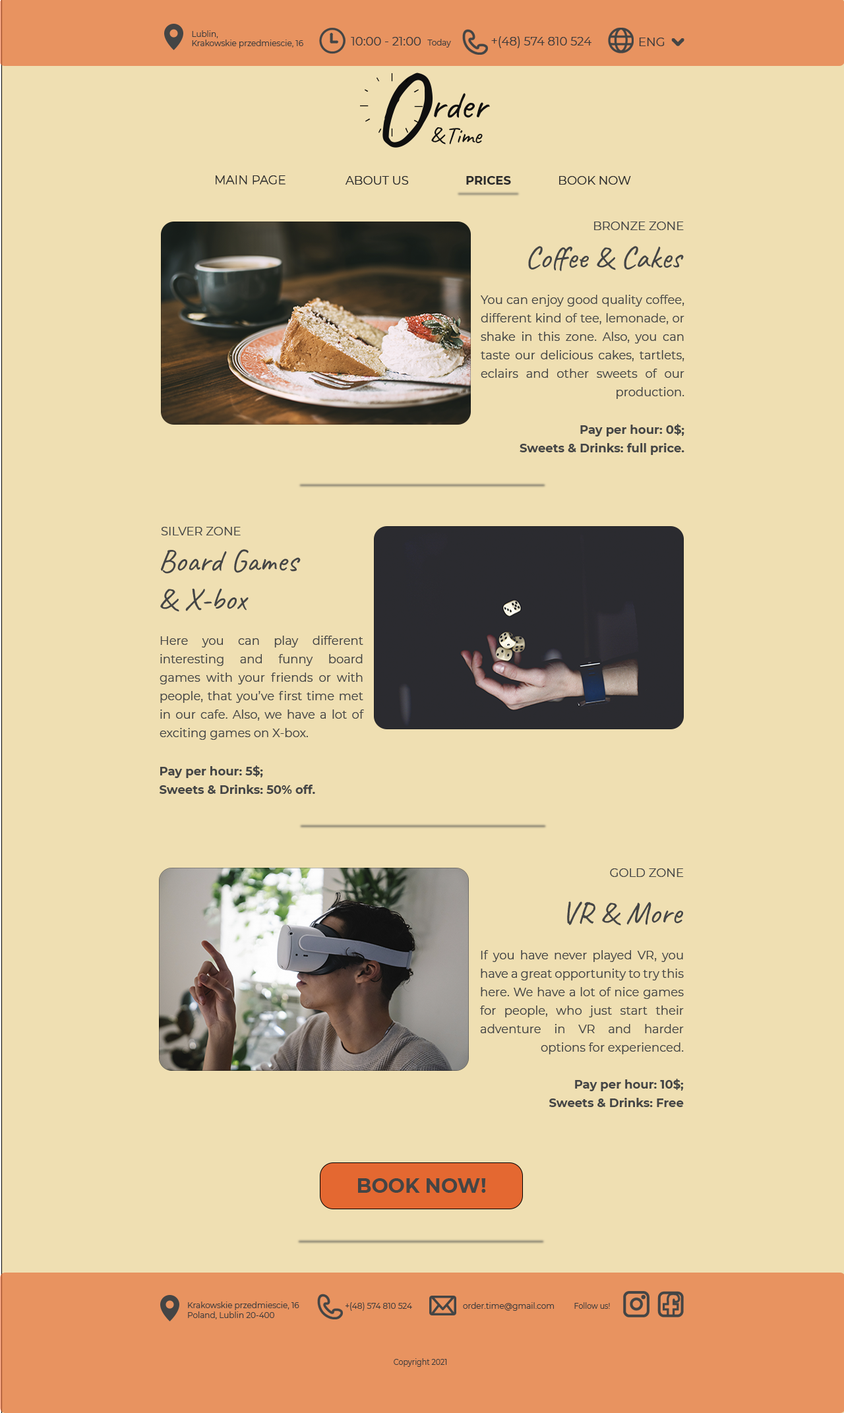
<style>
.page{position:relative;width:844px;height:1413px;background:#efdfb2}
.page>*{position:absolute;margin:0}
.t1{font:7.9px "Montserrat-Regular";color:#3e3b3b}
.t2{font:11.9px "Montserrat-Regular";color:#3e3b3b}
.t3{font:105.5px "Caveat-Regular";color:#0f0f0f}
.t4{font:39.6px "Caveat-Regular";color:#0f0f0f}
.t5{font:23.7px "Caveat-Regular";color:#0f0f0f}
.t6{font:11.9px "Montserrat-ExtraLight";color:#2b2b2b;font-weight:bold}
.t7{font:11.9px "Montserrat-Regular";color:#2b2b2b}
.t8{font:11.9px "Montserrat-Bold";color:#2b2b2b}
.t9{font:11.9px "Montserrat-Regular";color:#444545}
.t10{font:31.6px "Caveat-Regular";color:#444545}
.t11{font:11.9px/18.5px "Montserrat-Regular";color:#444545}
.t12{font:11.9px/18.5px "Montserrat-Bold";color:#444545}
.t13{font:19.8px "Montserrat-Bold";color:#444545}
.t14{font:7.9px "Montserrat-Regular";color:#3e3b3b;scale:0.92 1}
</style>
<div class="page">
<p class="t1" style="left:192px;top:30px;width:111px;height:18px;text-align:justify">Lublin,<br>Krakowskie przedmiescie, 16</p>
<p class="t2" style="left:351px;top:37px;width:100px;height:10px">10:00 - 21:00  <span class="t1">Today</span></p>
<p class="t2" style="left:491px;top:36px;width:100px;height:12px">+(48) 574 810 524</p>
<p class="t2" style="left:639px;top:38px;width:26px;height:8px">ENG</p>
<p class="t3" style="left:382px;top:73px;width:51px;height:75px">O</p>
<p class="t4" style="left:434px;top:93px;width:56px;height:25px">rder</p>
<p class="t5" style="left:431px;top:127px;width:15px;height:17px">&amp;</p>
<p class="t5" style="left:449px;top:128px;width:34px;height:16px">Time</p>
<p class="t6" style="left:216px;top:175px;width:69px;height:10px">MAIN PAGE</p>
<p class="t7" style="left:345px;top:176px;width:64px;height:9px">ABOUT US</p>
<p class="t8" style="left:466px;top:176px;width:45px;height:9px">PRICES</p>
<p class="t7" style="left:559px;top:176px;width:72px;height:9px">BOOK NOW</p>
<p class="t9" style="left:594px;top:222px;width:90px;height:8px">BRONZE ZONE</p>
<p class="t10" style="left:528px;top:246px;width:156px;height:26px">Coffee &amp; Cakes</p>
<p class="t11" style="left:481px;top:295px;width:203px;height:104px;text-align:justify">You can enjoy good quality coffee, different kind of tee, lemonade, or shake in this zone. Also, you can taste our delicious cakes, tartlets, eclairs and other sweets of our production.</p>
<p class="t12" style="left:520px;top:424px;width:164px;height:31px;text-align:right">Pay per hour: 0$;<br>Sweets &amp; Drinks: full price.</p>
<p class="t9" style="left:161px;top:527px;width:80px;height:8px">SILVER ZONE</p>
<p class="t10" style="left:160px;top:549px;width:141px;height:63px">Board Games <br>&amp; X-box</p>
<p class="t11" style="left:160px;top:636px;width:204px;height:104px;text-align:justify">Here you can play different interesting and funny board games with your friends or with people, that you’ve first time met in our cafe. Also, we have a lot of exciting games on X-box.</p>
<p class="t12" style="left:160px;top:765px;width:155px;height:29px;text-align:justify">Pay per hour: 5$;<br>Sweets &amp; Drinks: 50% off.</p>
<p class="t9" style="left:610px;top:868px;width:74px;height:9px">GOLD ZONE</p>
<p class="t10" style="left:567px;top:901px;width:116px;height:25px">VR &amp; More</p>
<p class="t11" style="left:480px;top:950px;width:204px;height:104px;text-align:justify">If you have never played VR, you have a great opportunity to try this here. We have a lot of nice games for people, who just start their adventure in VR and harder options for experienced.</p>
<p class="t12" style="left:549px;top:1079px;width:135px;height:28px;text-align:justify">Pay per hour: 10$;<br>Sweets &amp; Drinks: Free</p>
<p class="t13" style="left:358px;top:1178px;width:128px;height:15px">BOOK NOW!</p>
<p class="t1" style="left:188px;top:1302px;width:111px;height:17px;text-align:justify">Krakowskie przedmiescie, 16<br>Poland, Lublin 20-400</p>
<p class="t1" style="left:345px;top:1302px;width:67px;height:9px">+(48) 574 810 524</p>
<p class="t1" style="left:463px;top:1302px;width:91px;height:9px">order.time@gmail.com</p>
<p class="t14" style="left:574px;top:1302px;width:36px;height:7px">Follow us!</p>
<p class="t14" style="left:394px;top:1358px;width:53px;height:9px">Copyright 2021</p>
</div>
